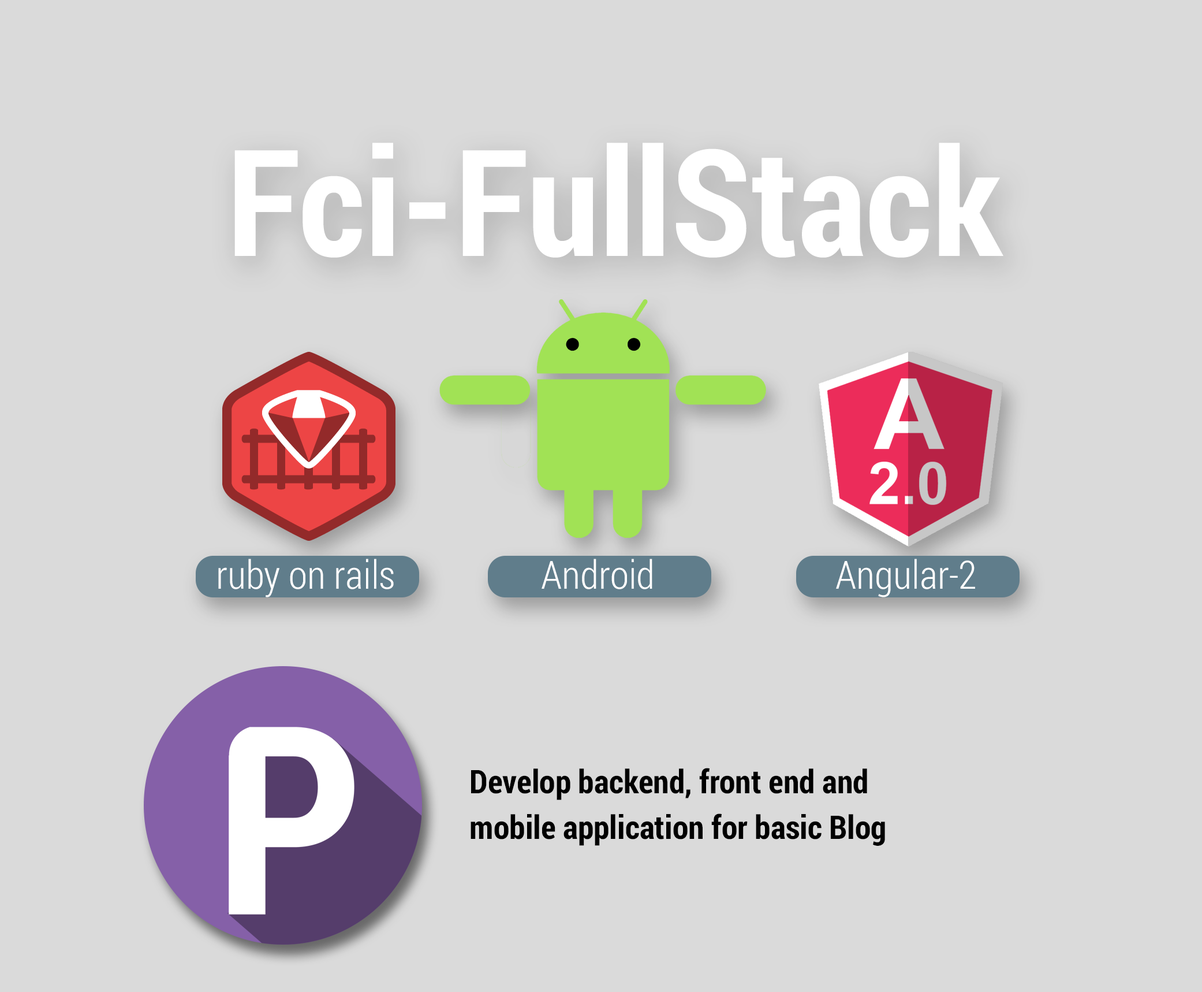
<style>
.page{position:relative;width:1202px;height:992px;background:#dadada}
.page>*{position:absolute;margin:0}
.t1{font:148.4px "RobotoCondensed-Bold";color:#ffffff}
.t2{font:39px "RobotoCondensed-Light";color:#ffffff}
.t3{font:32.5px/45.2px "RobotoCondensed-Bold";color:#000000}
</style>
<div class="page">
<p class="t1" style="left:234px;top:143px;width:770px;height:115px">Fci-FullStack</p>
<p class="t2" style="left:218px;top:558px;width:176px;height:39px">ruby on rails</p>
<p class="t2" style="left:542px;top:558px;width:111px;height:31px">Android</p>
<p class="t2" style="left:836px;top:558px;width:139px;height:39px">Angular-2</p>
<p class="t3" style="left:471px;top:768px;width:414px;height:78px">Develop backend, front end and <br>mobile application for basic Blog</p>
</div>
